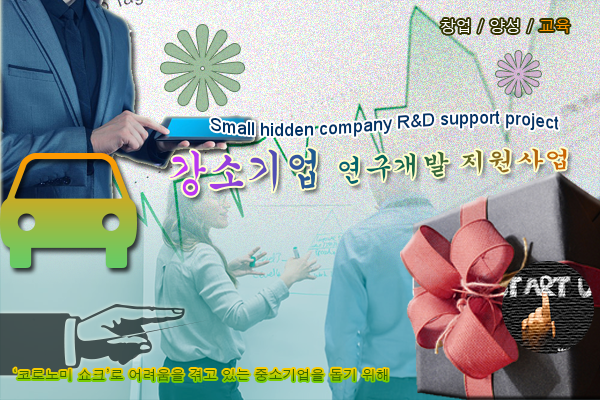
<style>
.page{position:relative;width:600px;height:400px}
.page>*{position:absolute;margin:0}
.t1{font:16px "Dotum";color:#ffffff}
.t2{font:16px "Dotum";color:#ff9900}
.t3{font:18px "ArialMT";color:#003366}
.t4{font:28.3px "Gungsuh"}
.t5{font:39px "Gungsuh"}
.t6{font:14px "Dotum";color:#336600}
</style>
<div class="page">
<p class="t1" style="left:441px;top:19px;width:129px;height:15px">창업 / 양성 / <span class="t2">교육</span></p>
<p class="t3" style="left:211px;top:110px;width:348px;height:27px">Small hidden company R&amp;D support project</p>
<p class="t4" style="left:170px;top:148px;width:397px;height:48px"><span class="t5">강소기업 </span>연구개발 지원사업</p>
<p class="t6" style="left:14px;top:368px;width:374px;height:14px">‘코로노미 쇼크’로 어려움을 겪고 있는 중소기업을 돕기 위해</p>
</div>
